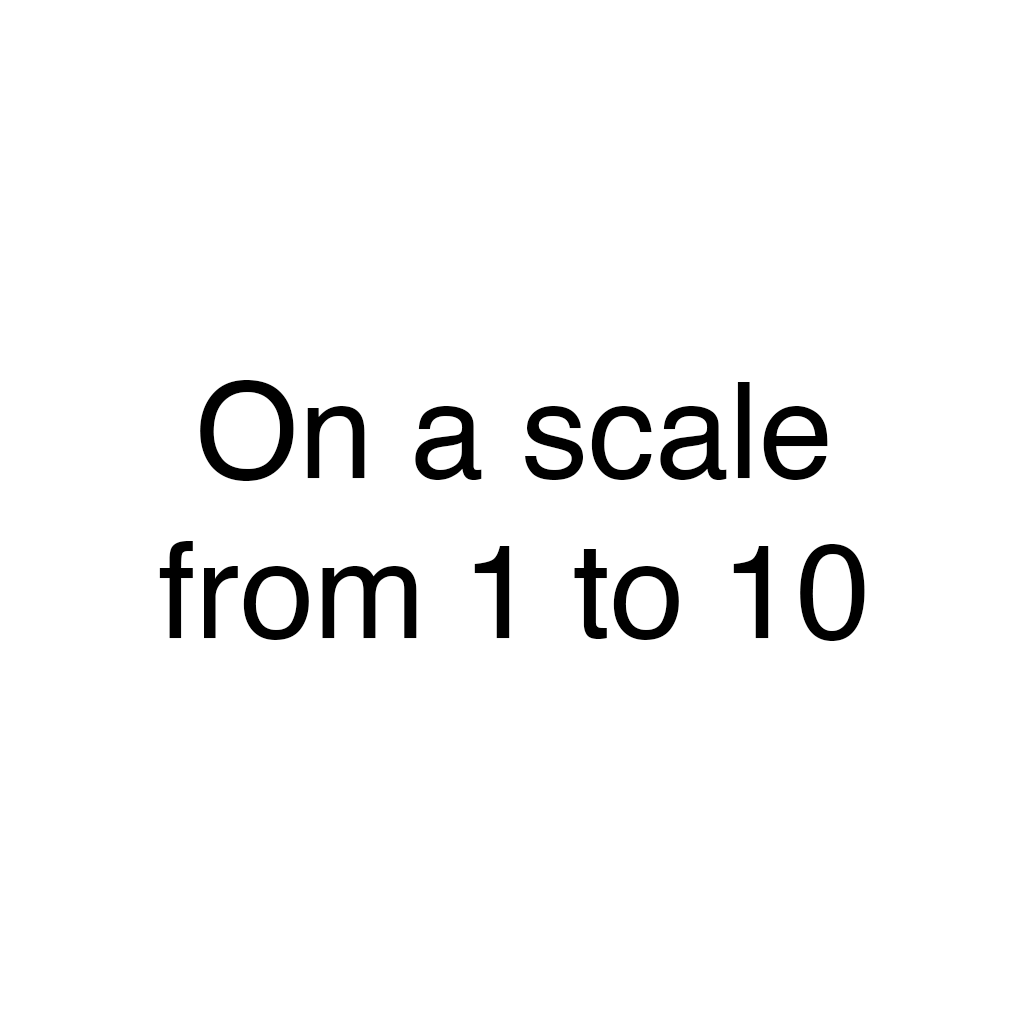
<style>
.page{position:relative;width:1024px;height:1024px;background:#ffffff}
.page>*{position:absolute;margin:0}
.t1{font:133.3px "Helvetica";color:#000000}
</style>
<div class="page">
<p class="t1" style="left:159px;top:380px;width:706px;height:261px;text-align:center">On a scale<br>from 1 to 10</p>
</div>
